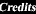
<style>
.page{position:relative;width:36px;height:14px;background:#000000}
.page>*{position:absolute;margin:0}
.t1{font:12px "TimesNewRomanPS-BoldMT";color:#fdfdfe;font-style:italic}
</style>
<div class="page">
<p class="t1" style="left:0px;top:2px;width:36px;height:10px">Credits</p>
</div>
